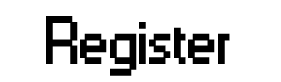
<style>
.page{position:relative;width:281px;height:82px;background:#ffffff}
.page>*{position:absolute;margin:0}
.t1{font:62.5px "Small Fonts";color:#000000;font-weight:bold}
</style>
<div class="page">
<p class="t1" style="left:46px;top:16px;width:184px;height:60px">Register</p>
</div>
